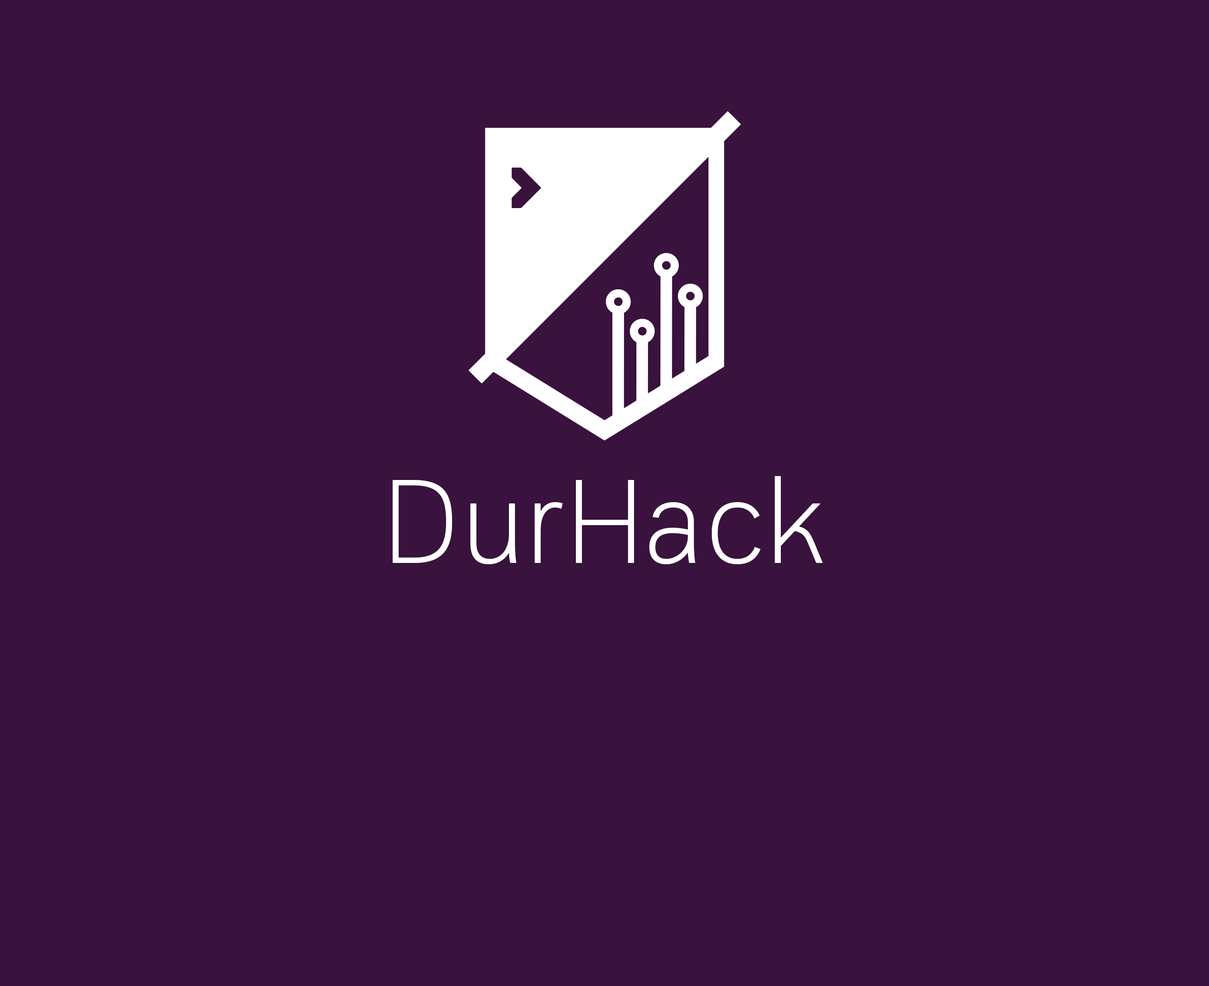
<style>
.page{position:relative;width:1209px;height:986px;background:#39123d}
.page>*{position:absolute;margin:0}
.t1{font:118.7px "Cloud-Light";color:#ffffff}
</style>
<div class="page">
<p class="t1" style="left:393px;top:476px;width:430px;height:88px">DurHack</p>
</div>
